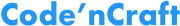
<style>
.page{position:relative;width:180px;height:26px;background:#ffffff}
.page>*{position:absolute;margin:0}
.t1{font:28.7px "Futura-Bold";color:#2196f3}
</style>
<div class="page">
<p class="t1" style="left:1px;top:0px;width:179px;height:26px">Code’nCraft</p>
</div>
